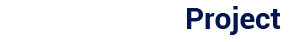
<style>
.page{position:relative;width:289px;height:42px;background:#ffffff}
.page>*{position:absolute;margin:0}
.t1{font:30px "Roboto-Bold";color:#02164e}
</style>
<div class="page">
<p class="t1" style="left:187px;top:6px;width:94px;height:29px">Project</p>
</div>
